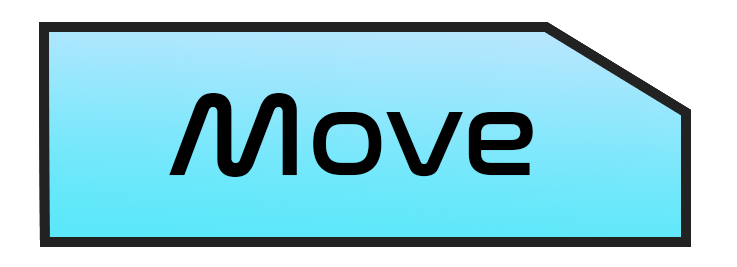
<style>
.page{position:relative;width:737px;height:267px;background:#ffffff}
.page>*{position:absolute;margin:0}
.t1{font:120px "NasalizationRg-Regular";color:#000000}
</style>
<div class="page">
<p class="t1" style="left:169px;top:93px;width:364px;height:84px">Move</p>
<p class="t1" style="left:169px;top:93px;width:364px;height:84px">Move</p>
</div>
